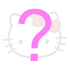
<style>
.page{position:relative;width:70px;height:70px;background:#ffffff}
.page>*{position:absolute;margin:0}
.t1{font:72px "ArialMT";color:#fc7ef5}
</style>
<div class="page">
<p class="t1" style="left:18px;top:8px;width:34px;height:53px">?</p>
</div>
